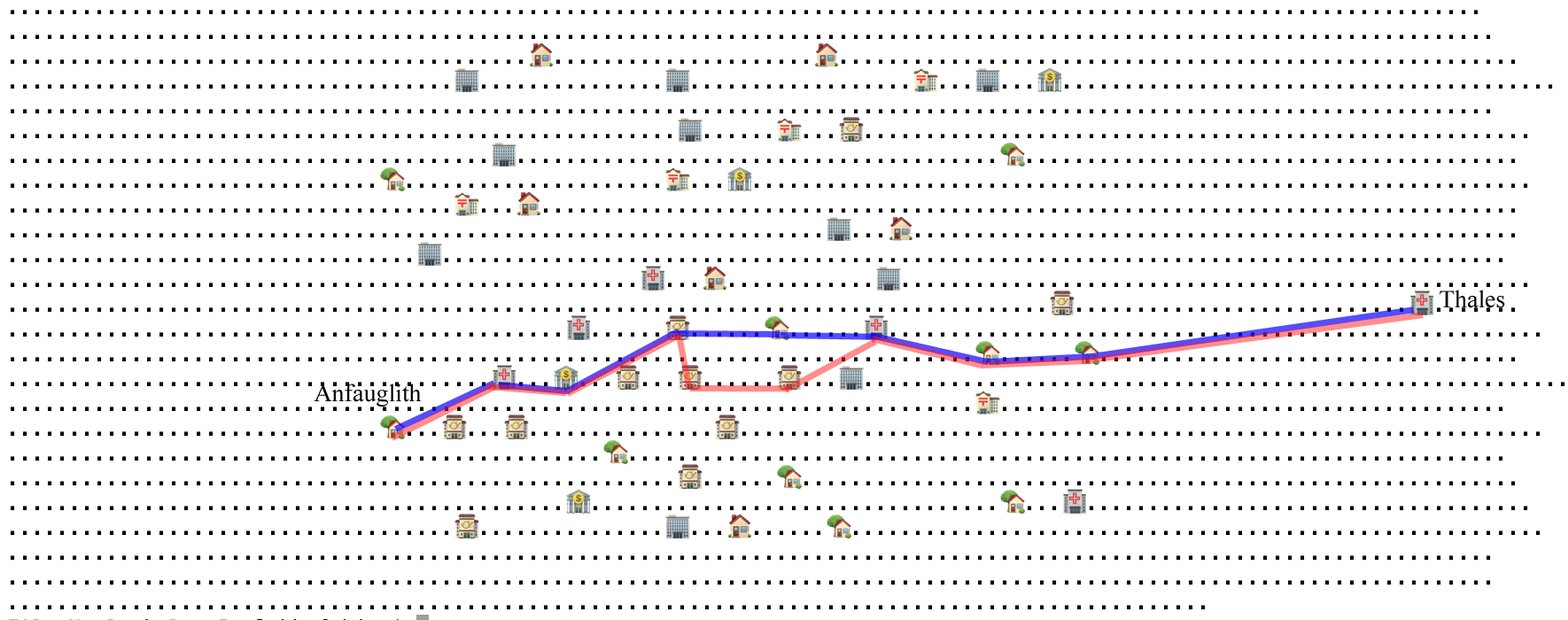
<style>
.page{position:relative;width:1568px;height:620px;background:#ffffff}
.page>*{position:absolute;margin:0}
.t1{font:24.8px "TimesNewRomanPSMT";color:#010000}
</style>
<div class="page">
<p class="t1" style="left:1440px;top:290px;width:65px;height:18px">Thales</p>
<p class="t1" style="left:314px;top:384px;width:108px;height:23px">Anfauglith</p>
</div>
